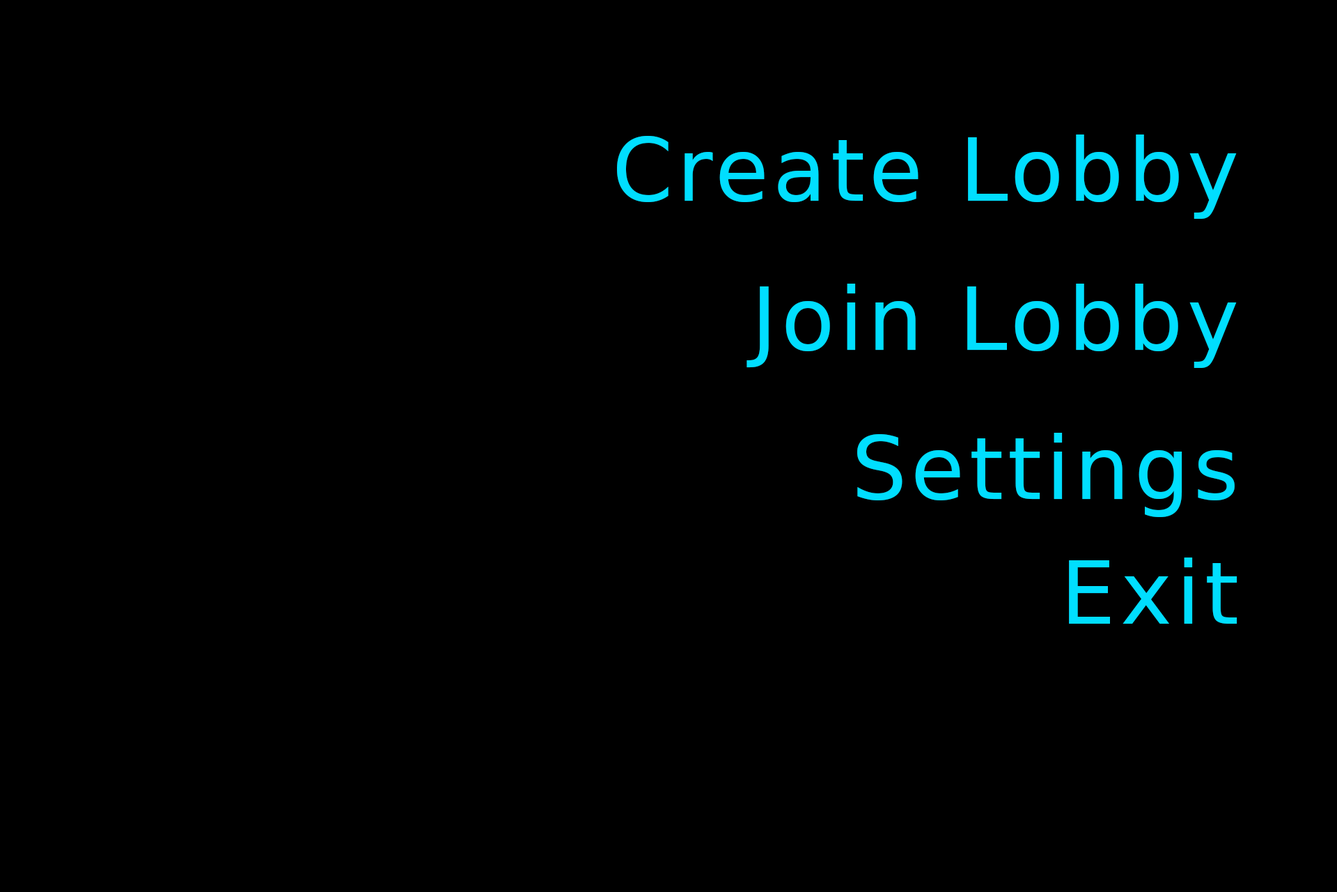
<style>
.page{position:relative;width:1337px;height:892px;background:#000000}
.page>*{position:absolute;margin:0}
.t1{font:87.1px "BitstreamVeraSans-Roman";letter-spacing:0.05em;color:#00deff}
</style>
<div class="page">
<p class="t1" style="left:617px;top:134px;width:620px;height:85px">Create Lobby</p>
<p class="t1" style="left:747px;top:284px;width:490px;height:84px">Join Lobby</p>
<p class="t1" style="left:857px;top:433px;width:378px;height:84px">Settings</p>
<p class="t1" style="left:1069px;top:557px;width:169px;height:66px">Exit</p>
</div>
